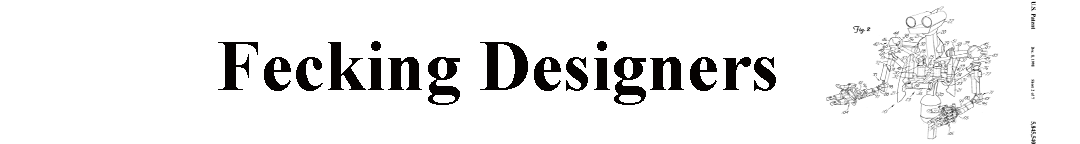
<style>
.page{position:relative;width:1080px;height:144px;background:#ffffff}
.page>*{position:absolute;margin:0}
.t1{font:72px "TimesNewRomanPS-BoldMT";color:#050201}
</style>
<div class="page">
<p class="t1" style="left:218px;top:41px;width:558px;height:64px">Fecking Designers</p>
</div>
